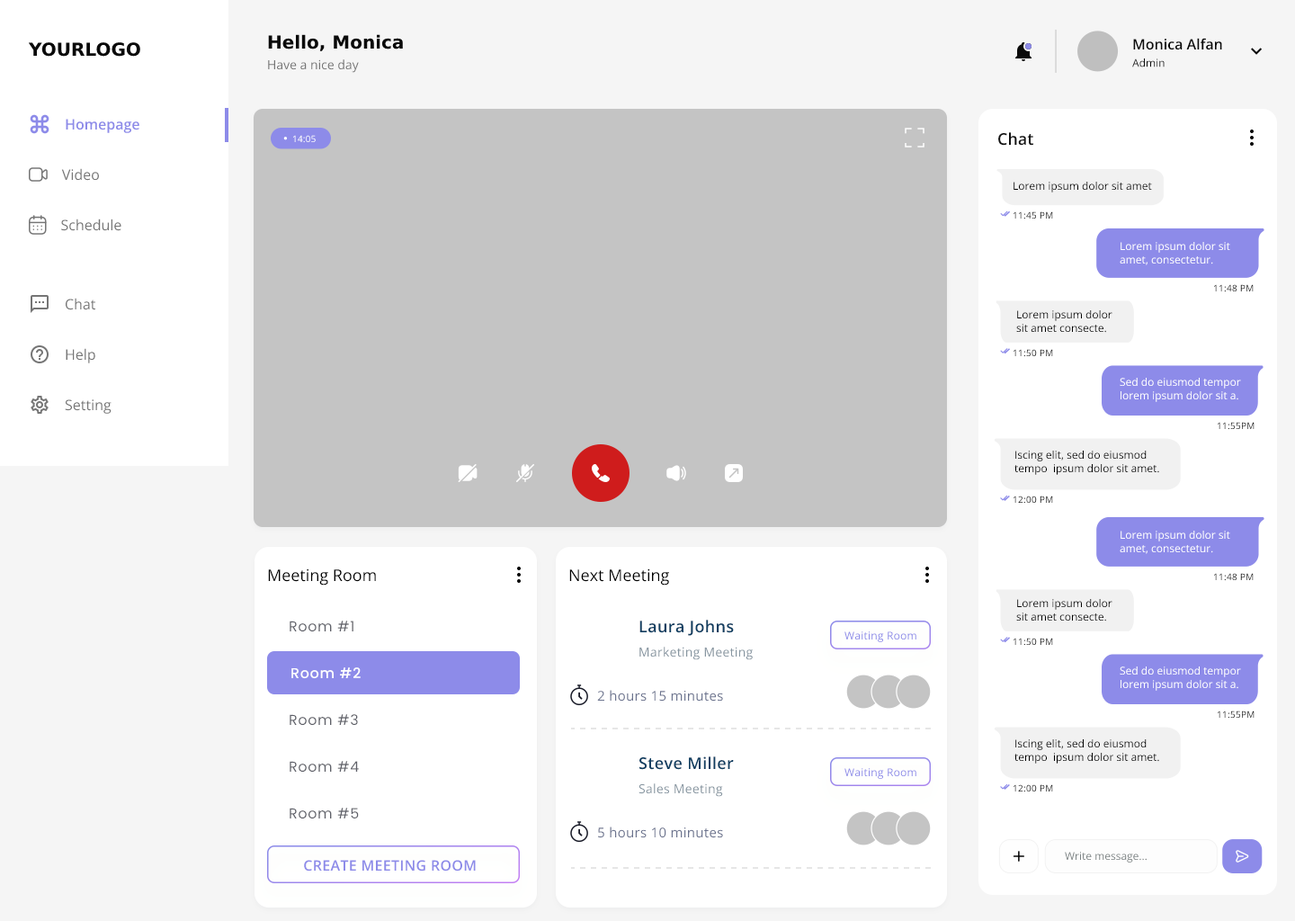
<style>
.page{position:relative;width:1295px;height:921px;background:#ffffff}
.page>*{position:absolute;margin:0}
.t1{font:18px "OpenSansRoman-SemiBold";color:#0a0a0a}
.t2{font:14.4px "OpenSans-SemiBold";color:#0a0a0a}
.t3{font:18px "OpenSansRoman-Bold";color:#0a0a0a}
.t4{font:12.6px "OpenSans-Regular";color:#757575}
.t5{font:10.8px "OpenSans-Regular";color:#0a0a0a}
.t6{font:14.4px "OpenSans-SemiBold";color:#8d8be9}
.t7{font:9px "OpenSans-Regular";letter-spacing:0.02em;color:#ffffff}
.t8{font:16.2px "OpenSans-SemiBold";color:#121212}
.t9{font:14.4px "OpenSans-Regular";color:#757575}
.t10{font:10.8px "OpenSans-Regular";color:#000000}
.t11{font:9px "OpenSans-Regular";letter-spacing:0.03em;color:#232323}
.t12{font:10.8px "OpenSans-Regular";color:#ffffff}
.t13{font:9px "OpenSans-Regular";letter-spacing:0.03em;color:#000000}
.t14{font:16.2px "OpenSans-Regular";color:#000000}
.t15{font:14.4px "Poppins-Regular";letter-spacing:0.04em;color:#5e6069}
.t16{font:16.2px "OpenSans-SemiBold";letter-spacing:0.02em;color:#0f3f62}
.t17{font:10.8px "OpenSans-Regular";letter-spacing:0.02em;color:#8d8be9}
.t18{font:12.6px "OpenSans-Regular";letter-spacing:0.02em;color:#8695a0}
.t19{font:14.4px "Poppins-Medium";letter-spacing:0.04em;color:#ffffff}
.t20{font:13.5px "OpenSans-Regular";letter-spacing:0.02em;color:#6b738e}
.t21{font:10.8px "OpenSans-Regular";color:#7b8283}
.t22{font:14.4px "OpenSans-SemiBold";letter-spacing:0.02em;color:#8d8be9;text-transform:uppercase}
</style>
<div class="page">
<p class="t1" style="left:268px;top:34px;width:135px;height:17px">Hello, Monica</p>
<p class="t2" style="left:1133px;top:38px;width:89px;height:12px">Monica Alfan</p>
<p class="t3" style="left:28px;top:42px;width:112px;height:15px">YOURLOGO</p>
<p class="t4" style="left:268px;top:59px;width:91px;height:14px">Have a nice day</p>
<p class="t5" style="left:1132px;top:58px;width:33px;height:9px">Admin</p>
<p class="t6" style="left:66px;top:119px;width:73px;height:14px">Homepage</p>
<p class="t7" style="left:292px;top:135px;width:24px;height:8px">14:05</p>
<p class="t8" style="left:998px;top:132px;width:35px;height:14px">Chat</p>
<p class="t9" style="left:61px;top:168px;width:38px;height:13px">Video</p>
<p class="t10" style="left:1013px;top:181px;width:139px;height:11px">Lorem ipsum dolor sit amet</p>
<p class="t9" style="left:61px;top:219px;width:60px;height:12px">Schedule</p>
<p class="t11" style="left:1013px;top:211px;width:40px;height:8px">11:45 PM</p>
<p class="t12" style="left:1120px;top:241px;width:110px;height:24px">Lorem ipsum dolor sit amet, consectetur.</p>
<p class="t11" style="left:1213px;top:284px;width:41px;height:8px">11:48 PM</p>
<p class="t9" style="left:65px;top:298px;width:31px;height:12px">Chat</p>
<p class="t10" style="left:1016px;top:309px;width:96px;height:24px">Lorem ipsum dolor sit amet consecte.</p>
<p class="t9" style="left:66px;top:348px;width:29px;height:15px">Help</p>
<p class="t11" style="left:1013px;top:349px;width:40px;height:8px">11:50 PM</p>
<p class="t12" style="left:1120px;top:377px;width:121px;height:25px">Sed do eiusmod tempor lorem ipsum dolor sit a.</p>
<p class="t9" style="left:65px;top:399px;width:47px;height:15px">Setting</p>
<p class="t13" style="left:1217px;top:422px;width:37px;height:8px">11:55PM</p>
<p class="t10" style="left:1014px;top:450px;width:145px;height:25px">Iscing elit, sed do eiusmod tempo  ipsum dolor sit amet.</p>
<p class="t11" style="left:1013px;top:495px;width:40px;height:9px">12:00 PM</p>
<p class="t12" style="left:1120px;top:530px;width:110px;height:24px">Lorem ipsum dolor sit amet, consectetur.</p>
<p class="t14" style="left:268px;top:568px;width:108px;height:17px">Meeting Room</p>
<p class="t14" style="left:569px;top:568px;width:100px;height:17px">Next Meeting</p>
<p class="t11" style="left:1213px;top:573px;width:41px;height:8px">11:48 PM</p>
<p class="t10" style="left:1016px;top:598px;width:96px;height:23px">Lorem ipsum dolor sit amet consecte.</p>
<p class="t15" style="left:290px;top:620px;width:63px;height:12px">Room #1</p>
<p class="t16" style="left:639px;top:620px;width:95px;height:16px">Laura Johns</p>
<p class="t17" style="left:844px;top:631px;width:72px;height:11px">Waiting Room</p>
<p class="t11" style="left:1013px;top:638px;width:40px;height:8px">11:50 PM</p>
<p class="t18" style="left:639px;top:647px;width:114px;height:13px">Marketing Meeting</p>
<p class="t12" style="left:1120px;top:665px;width:121px;height:26px">Sed do eiusmod tempor lorem ipsum dolor sit a.</p>
<p class="t19" style="left:291px;top:667px;width:70px;height:12px">Room #2</p>
<p class="t20" style="left:597px;top:690px;width:126px;height:11px">2 hours 15 minutes</p>
<p class="t13" style="left:1217px;top:710px;width:37px;height:9px">11:55PM</p>
<p class="t15" style="left:290px;top:714px;width:68px;height:12px">Room #3</p>
<p class="t10" style="left:1014px;top:738px;width:145px;height:25px">Iscing elit, sed do eiusmod tempo  ipsum dolor sit amet.</p>
<p class="t15" style="left:290px;top:761px;width:69px;height:11px">Room #4</p>
<p class="t16" style="left:638px;top:756px;width:96px;height:14px">Steve Miller</p>
<p class="t17" style="left:844px;top:768px;width:72px;height:11px">Waiting Room</p>
<p class="t18" style="left:638px;top:783px;width:85px;height:14px">Sales Meeting</p>
<p class="t11" style="left:1013px;top:784px;width:40px;height:8px">12:00 PM</p>
<p class="t15" style="left:290px;top:808px;width:69px;height:11px">Room #5</p>
<p class="t20" style="left:598px;top:826px;width:125px;height:12px">5 hours 10 minutes</p>
<p class="t21" style="left:1065px;top:852px;width:82px;height:10px">Write message...</p>
<p class="t22" style="left:304px;top:860px;width:172px;height:11px">create meeting room</p>
</div>
